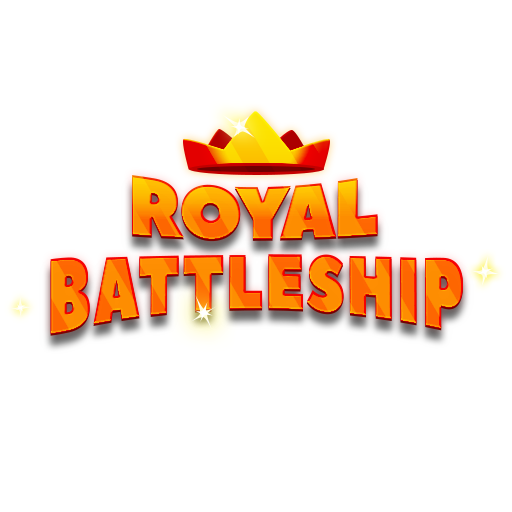
<style>
.page{position:relative;width:512px;height:512px;background:#ffffff}
.page>*{position:absolute;margin:0}
.t1{font:86.2px "PeaceSans";letter-spacing:-0.05em;scale:0.87 1}
.t2{font:107.2px "PeaceSans";letter-spacing:0.025em;scale:0.57 1}
</style>
<div class="page">
<p class="t1" style="left:132px;top:175px;width:246px;height:65px">ROYAL</p>
<p class="t2" style="left:50px;top:254px;width:414px;height:80px">BATTLESHIP</p>
</div>
